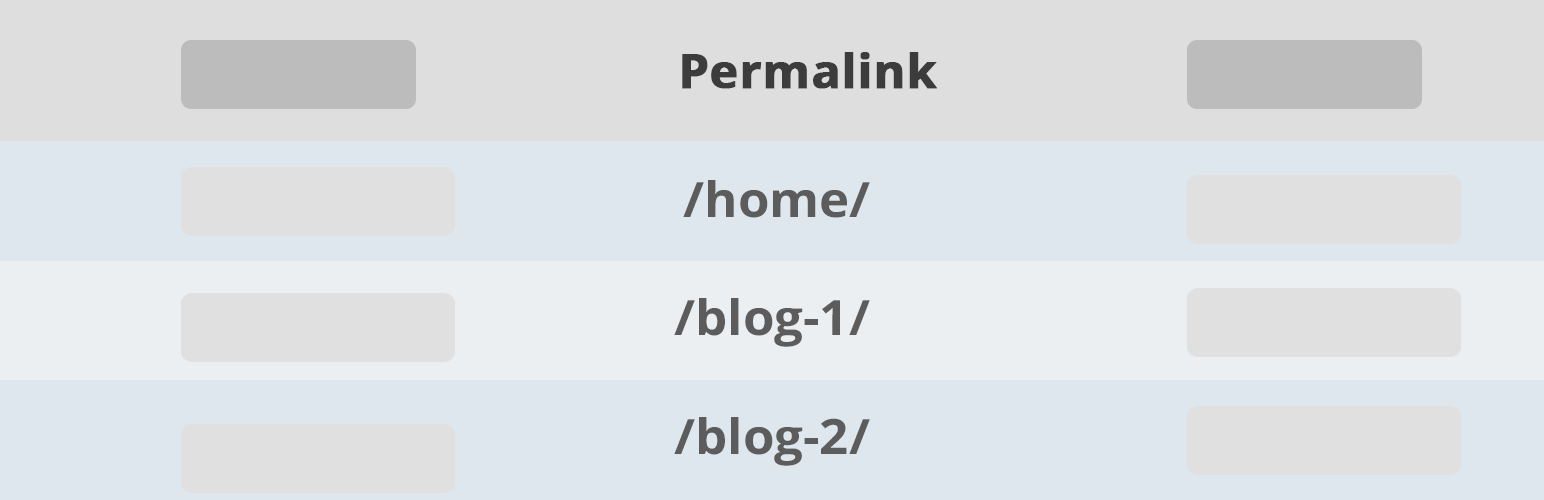
<style>
.page{position:relative;width:1544px;height:500px;background:#dde7ed}
.page>*{position:absolute;margin:0}
.t1{font:48.2px "OpenSans-Bold";color:#3c3c3c;font-weight:bold}
.t2{font:48.7px "OpenSans-Bold";color:#5c5c5c;scale:1.05 1}
</style>
<div class="page">
<p class="t1" style="left:682px;top:52px;width:255px;height:37px">Permalink</p>
<p class="t2" style="left:683px;top:180px;width:187px;height:38px">/home/</p>
<p class="t2" style="left:674px;top:298px;width:196px;height:49px">/blog-1/</p>
<p class="t2" style="left:674px;top:417px;width:196px;height:49px">/blog-2/</p>
</div>
